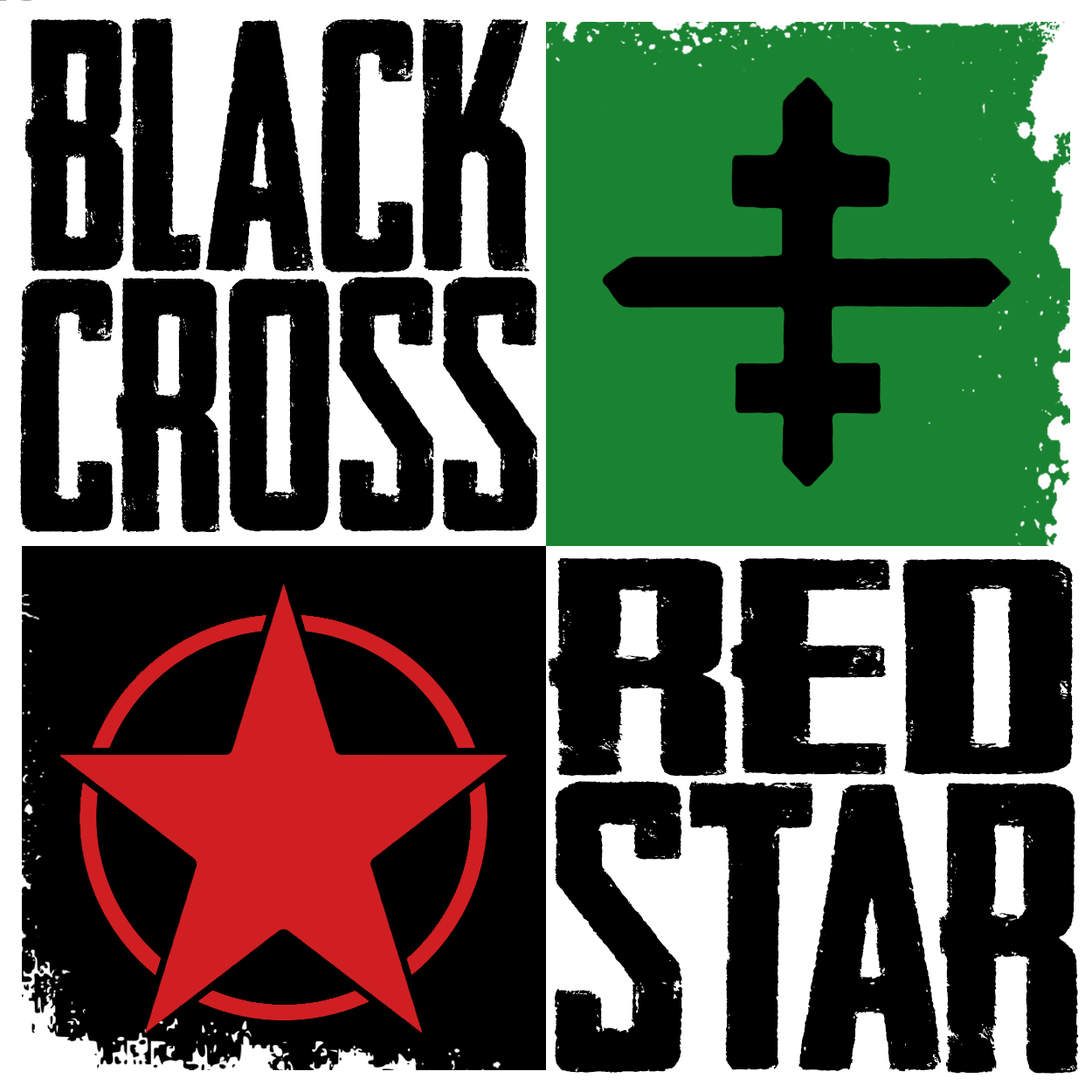
<style>
.page{position:relative;width:1092px;height:1092px;background:#000000}
.page>*{position:absolute;margin:0}
.t1{font:339.4px/259.5px "HeadlinerNo.45";color:#000000;scale:0.95 1}
.t2{font:387.9px/297px "HeadlinerNo.45";color:#000000;scale:1.13 1}
.t3{font:290.9px/297px "HeadlinerNo.45";color:#000000;scale:1.93 1}
</style>
<div class="page">
<p class="t1" style="left:20px;top:17px;width:518px;height:516px;text-align:center">BLACK<br>CROSS</p>
<p class="t2" style="left:548px;top:557px;width:531px;height:517px;text-align:center"><span class="t3">red<br></span>star</p>
</div>
